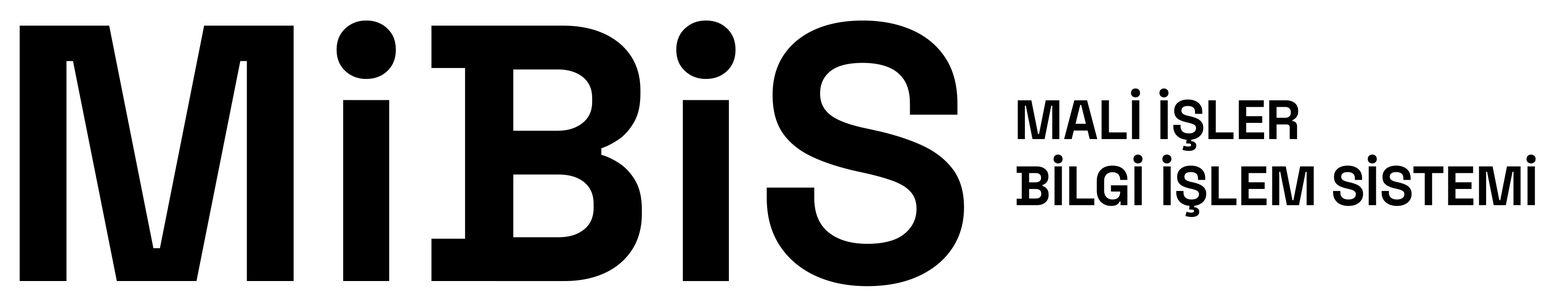
<style>
.page{position:relative;width:1568px;height:306px;background:#ffffff}
.page>*{position:absolute;margin:0}
.t1{font:55.4px "SpaceGrotesk-Bold";color:#000000}
</style>
<div class="page">
<p class="t1" style="left:1017px;top:88px;width:519px;height:130px">MALİ İŞLER<br>BİLGİ İŞLEM SİSTEMİ</p>
</div>
